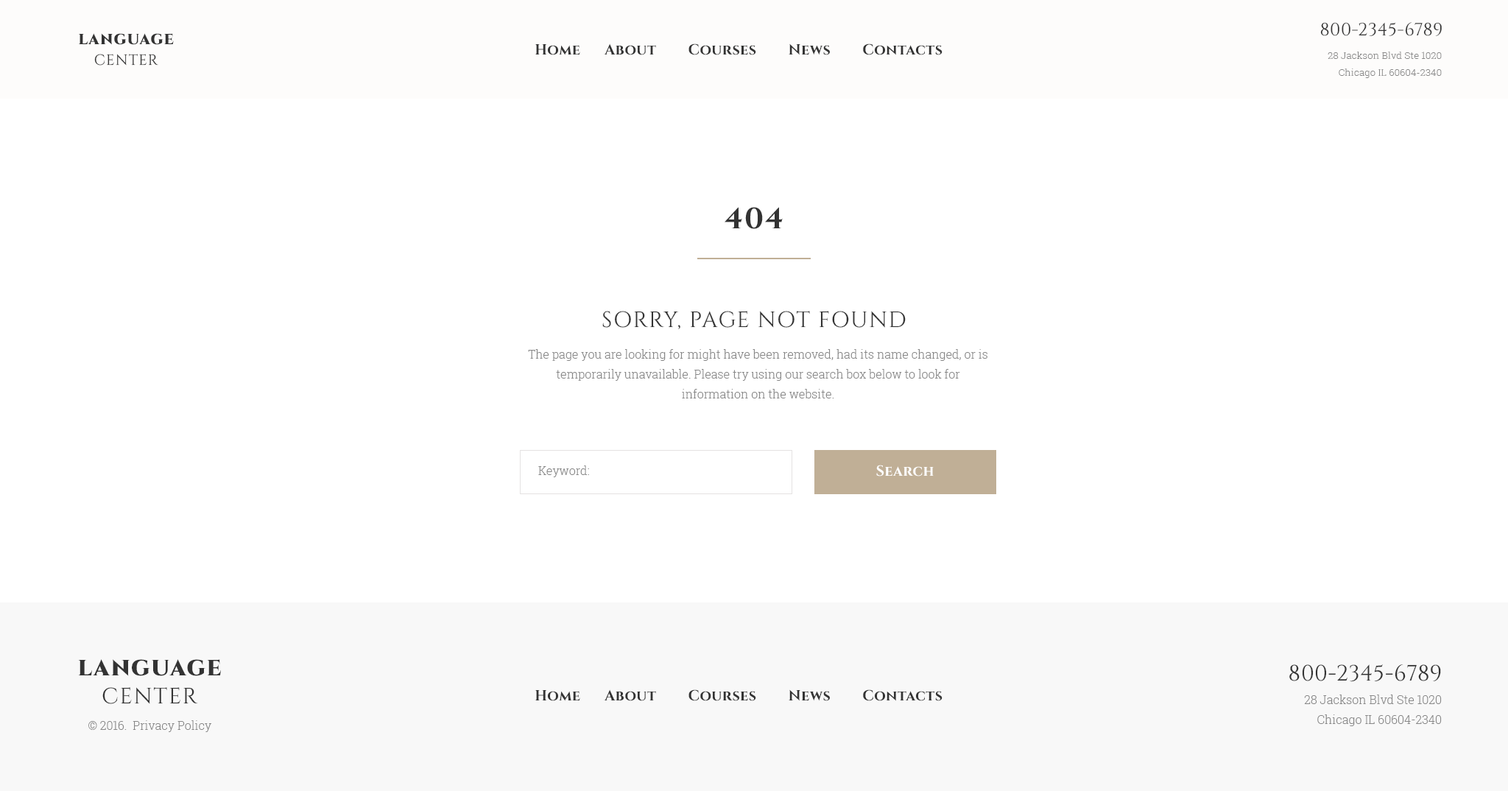
<style>
.page{position:relative;width:1508px;height:791px;background:#ffffff}
.page>*{position:absolute;margin:0}
.t1{font:17.7px "Cinzel-Regular";letter-spacing:0.02em;color:#333333;text-transform:uppercase}
.t2{font:14.7px/20.6px "Cinzel-Black";letter-spacing:0.06em;color:#333333;text-transform:uppercase}
.t3{font:14.7px/20.6px "Cinzel-Regular";letter-spacing:0.06em;color:#333333;text-transform:uppercase}
.t4{font:14.7px "Cinzel-Bold";letter-spacing:0.02em;color:#333333}
.t5{font:9.6px/16.9px "RobotoSlab-Light";letter-spacing:0.01em;color:#888888}
.t6{font:29.5px "Cinzel-Bold";letter-spacing:0.06em;color:#333333;text-transform:uppercase}
.t7{font:22.1px "Cinzel-Regular";letter-spacing:0.06em;color:#333333;text-transform:uppercase}
.t8{font:11.8px/19.9px "RobotoSlab-Light";color:#888888}
.t9{font:11.8px "RobotoSlab-Light";color:#888888}
.t10{font:14.7px "Cinzel-Bold";letter-spacing:0.02em;color:#ffffff}
.t11{font:22.1px/28px "Cinzel-Black";letter-spacing:0.06em;color:#333333;text-transform:uppercase}
.t12{font:22.1px/28px "Cinzel-Regular";letter-spacing:0.06em;color:#333333;text-transform:uppercase}
.t13{font:22.1px "Cinzel-Regular";letter-spacing:0.02em;color:#333333;text-transform:uppercase}
</style>
<div class="page">
<p class="t1" style="left:1320px;top:22px;width:122px;height:14px">800-2345-6789</p>
<p class="t2" style="left:78px;top:33px;width:96px;height:33px;text-align:center">Language<br><span class="t3">Center</span></p>
<p class="t4" style="left:535px;top:43px;width:407px;height:12px">Home      About        Courses        News        Contacts</p>
<p class="t5" style="left:1328px;top:52px;width:114px;height:26px;text-align:right">28 Jackson Blvd Ste 1020<br>Chicago IL 60604-2340</p>
<p class="t6" style="left:725px;top:207px;width:58px;height:22px">404</p>
<p class="t7" style="left:602px;top:311px;width:304px;height:18px">Sorry, page not found</p>
<p class="t8" style="left:528px;top:349px;width:459px;height:49px;text-align:center">The page you are looking for might have been removed, had its name changed, or is temporarily unavailable. Please try using our search box below to look for <br>information on the website.</p>
<p class="t9" style="left:538px;top:465px;width:51px;height:12px">Keyword:</p>
<p class="t10" style="left:876px;top:465px;width:58px;height:11px">Search</p>
<p class="t11" style="left:78px;top:659px;width:143px;height:45px;text-align:center">Language<br><span class="t12">Center</span></p>
<p class="t13" style="left:1289px;top:664px;width:152px;height:18px">800-2345-6789</p>
<p class="t4" style="left:535px;top:689px;width:407px;height:12px">Home      About        Courses        News        Contacts</p>
<p class="t8" style="left:1304px;top:694px;width:138px;height:32px;text-align:right">28 Jackson Blvd Ste 1020<br>Chicago IL 60604-2340</p>
<p class="t9" style="left:88px;top:720px;width:123px;height:12px">© 2016.  Privacy Policy</p>
</div>
